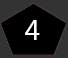
<style>
.page{position:relative;width:68px;height:58px;background:#000000}
.page>*{position:absolute;margin:0}
.t1{font:30px "MyriadPro-Regular";color:#ffffff}
</style>
<div class="page">
<p class="t1" style="left:25px;top:20px;width:15px;height:20px">4</p>
</div>
